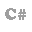
<style>
.page{position:relative;width:32px;height:32px;background:#ffffff}
.page>*{position:absolute;margin:0}
.t1{font:16.7px "CooperBlack";color:#9f9f9f}
</style>
<div class="page">
<p class="t1" style="left:5px;top:8px;width:21px;height:12px">C#</p>
</div>
